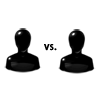
<style>
.page{position:relative;width:100px;height:100px;background:#ffffff}
.page>*{position:absolute;margin:0}
.t1{font:10.6px "MyriadPro-Regular";color:#000000;font-weight:bold}
</style>
<div class="page">
<p class="t1" style="left:44px;top:44px;width:13px;height:7px">vs.</p>
</div>
